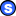
<style>
.page{position:relative;width:16px;height:16px;background:#ffffff}
.page>*{position:absolute;margin:0}
.t1{font:12px "Arial-Black";color:#ffffff}
</style>
<div class="page">
<p class="t1" style="left:4px;top:4px;width:9px;height:9px">S</p>
</div>
